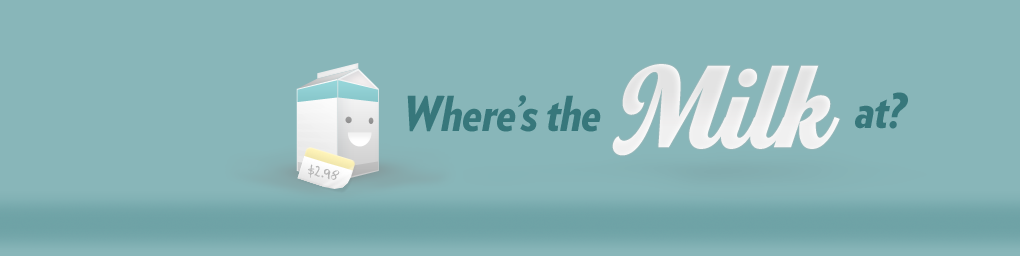
<style>
.page{position:relative;width:1020px;height:256px;background:#88b6b9}
.page>*{position:absolute;margin:0}
.t1{font:119.8px "HomeRunScript-roman";color:#dedddd}
.t2{font:48px "VerlagCondensed-BlackItalic";color:#37777b}
.t3{font:12.4px "JoseFernandez";letter-spacing:0.075em;color:#b6b6b6}
</style>
<div class="page">
<p class="t1" style="left:612px;top:64px;width:228px;height:92px">Milk</p>
<p class="t2" style="left:407px;top:95px;width:194px;height:37px">Where’s the</p>
<p class="t2" style="left:855px;top:92px;width:53px;height:37px">at?</p>
<p class="t3" style="left:308px;top:164px;width:32px;height:16px;rotate:8deg">$2.98</p>
</div>
